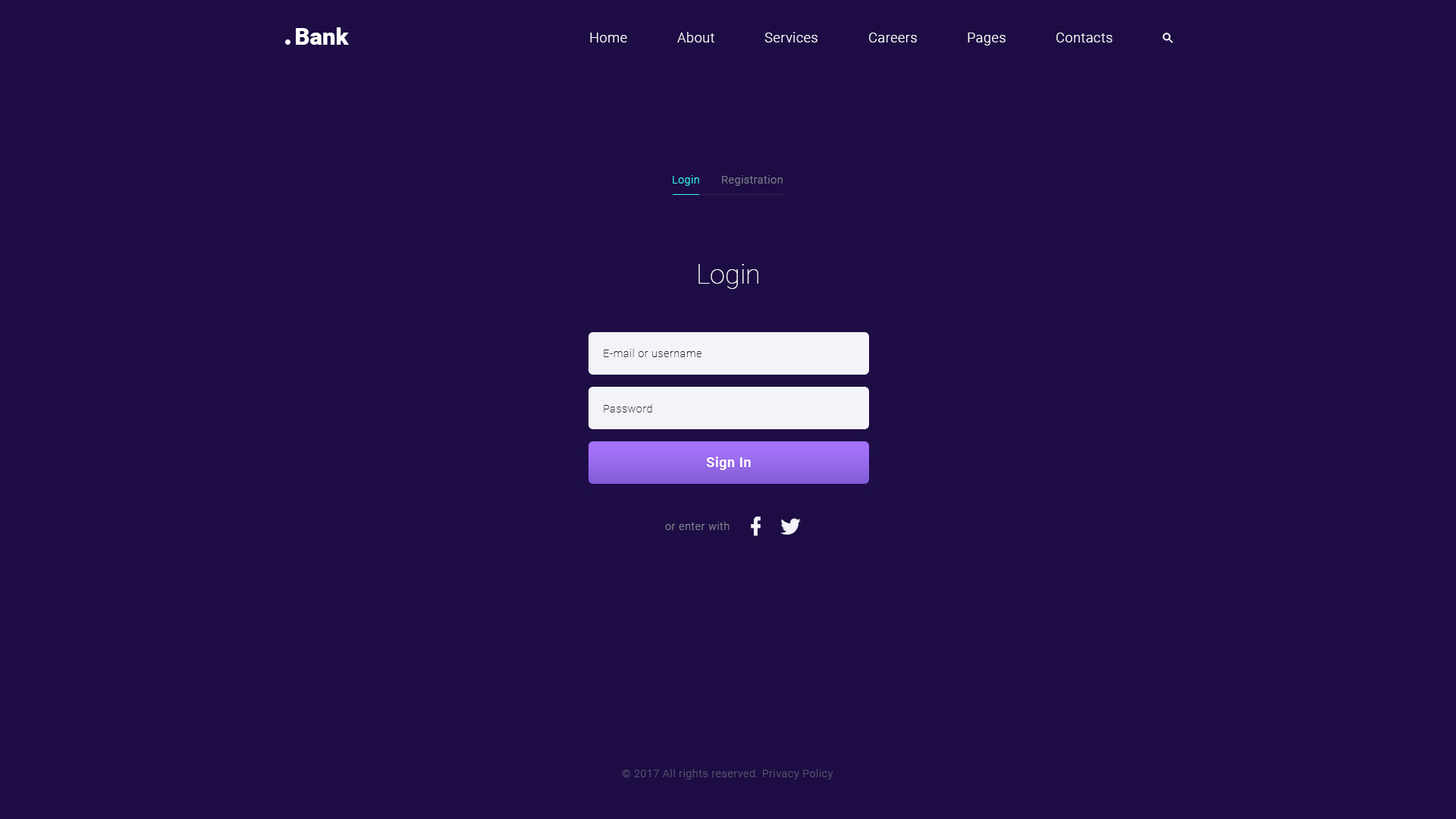
<style>
.page{position:relative;width:1456px;height:819px;background:#1d0d44}
.page>*{position:absolute;margin:0}
.t1{font:22.7px "Roboto-Black";color:#ffffff;scale:1.04 1}
.t2{font:13.6px "Roboto-Light";letter-spacing:0.03em;color:#ffffff}
.t3{font:10.6px "Roboto-Light";letter-spacing:0.05em;color:#36f1f8}
.t4{font:10.6px "Roboto-Light";letter-spacing:0.05em;color:#828590}
.t5{font:27.3px "Roboto-Thin";color:#ffffff}
.t6{font:10.6px "Roboto-Thin";letter-spacing:0.05em;color:#29293a}
.t7{font:13.6px "Roboto-Bold";letter-spacing:0.03em;color:#ffffff}
.t8{font:10.6px "Roboto-Light";letter-spacing:0.05em;color:#585471}
</style>
<div class="page">
<p class="t1" style="left:296px;top:27px;width:53px;height:18px">Bank</p>
<p class="t2" style="left:590px;top:33px;width:37px;height:9px">Home</p>
<p class="t2" style="left:677px;top:32px;width:37px;height:10px">About</p>
<p class="t2" style="left:764px;top:32px;width:53px;height:10px">Services</p>
<p class="t2" style="left:869px;top:33px;width:48px;height:9px">Careers</p>
<p class="t2" style="left:968px;top:33px;width:38px;height:12px">Pages</p>
<p class="t2" style="left:1056px;top:33px;width:56px;height:9px">Contacts</p>
<p class="t3" style="left:673px;top:175px;width:26px;height:11px">Login</p>
<p class="t4" style="left:722px;top:175px;width:61px;height:11px">Registration</p>
<p class="t5" style="left:698px;top:264px;width:60px;height:25px">Login</p>
<p class="t6" style="left:604px;top:349px;width:97px;height:8px">E-mail or username</p>
<p class="t6" style="left:604px;top:404px;width:48px;height:9px">Password</p>
<p class="t7" style="left:706px;top:457px;width:45px;height:13px">Sign In</p>
<p class="t4" style="left:665px;top:522px;width:65px;height:8px">or enter with</p>
<p class="t8" style="left:622px;top:769px;width:211px;height:11px">© 2017 All rights reserved. Privacy Policy</p>
</div>
